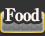
<style>
.page{position:relative;width:45px;height:36px;background:#333333}
.page>*{position:absolute;margin:0}
.t1{font:17px "RyuminPro-ExBold";letter-spacing:-0.08em;color:#fff6f2;font-weight:bold;scale:0.9 1}
</style>
<div class="page">
<p class="t1" style="left:5px;top:8px;width:35px;height:14px">Food</p>
</div>
